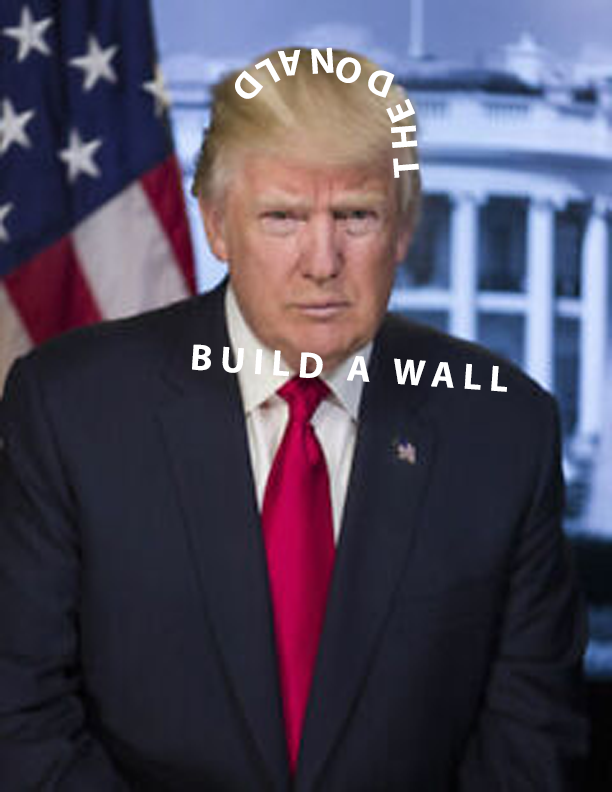
<style>
.page{position:relative;width:612px;height:792px}
.page>*{position:absolute;margin:0}
.t1{font:37px "MyriadPro-Bold";letter-spacing:0.21em;color:#ffffff;text-transform:uppercase}
</style>
<div class="page">
<p class="t1" style="left:235px;top:47px;width:184px;height:131px">the donald</p>
<p class="t1" style="left:192px;top:344px;width:315px;height:48px">build a wall</p>
</div>
